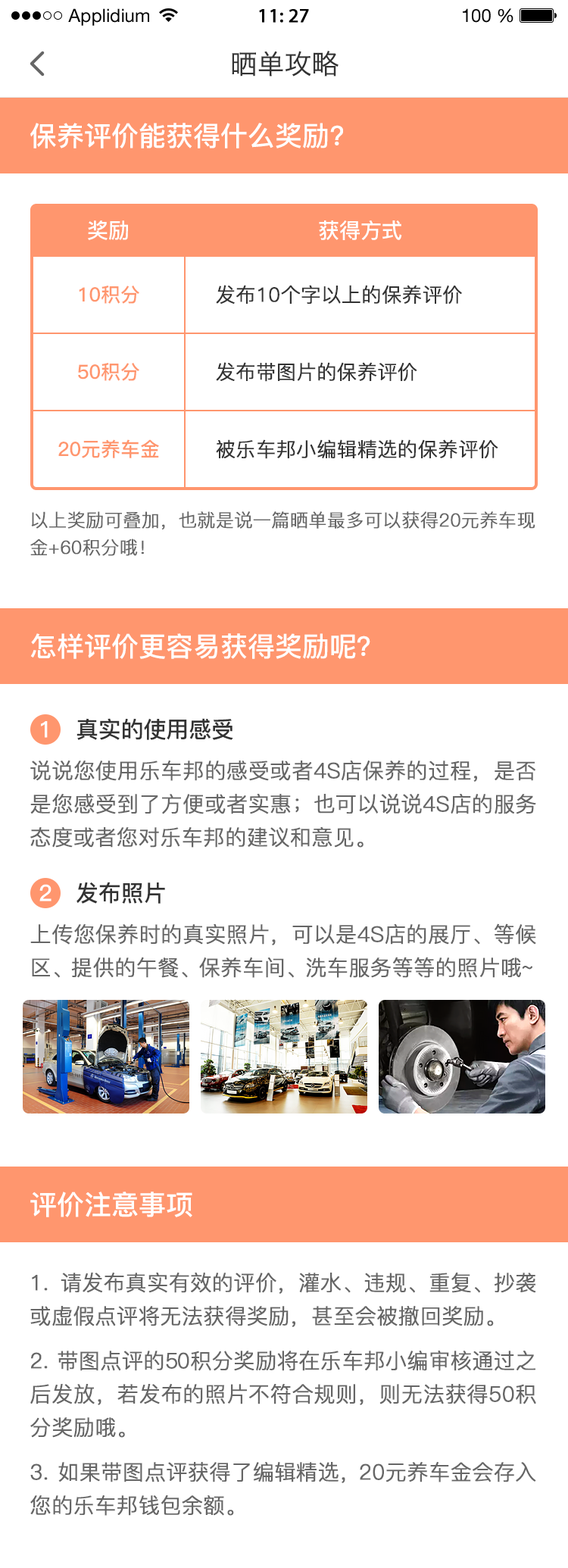
<style>
.page{position:relative;width:568px;height:1568px;background:#ffffff}
.page>*{position:absolute;margin:0}
.t1{font:27.3px "HiraginoSansGB-W3";color:#333333}
.t2{font:27.3px "PingFang-SC-Bold";color:#ffffff}
.t3{font:21.2px "PingFang-SC-Bold";letter-spacing:-0.005em;color:#ffffff}
.t4{font:19.7px "PingFang-SC-Bold";color:#ff966e}
.t5{font:19.7px "PingFang-SC-Regular";color:#333333;font-weight:bold}
.t6{font:18.2px/27.3px "PingFang-SC-Regular";letter-spacing:-0.005em;color:#666666;font-weight:bold}
.t7{font:22.7px "PingFang-SC-Bold";letter-spacing:-0.005em;color:#ffffff}
.t8{font:22.7px "PingFang-SC-Bold";letter-spacing:-0.005em;color:#333333}
.t9{font:21.2px/33.3px "PingFang-SC-Regular";letter-spacing:-0.005em;color:#666666;font-weight:bold}
</style>
<div class="page">
<p class="t1" style="left:232px;top:51px;width:107px;height:26px">晒单攻略</p>
<p class="t2" style="left:30px;top:123px;width:313px;height:25px">保养评价能获得什么奖励?</p>
<p class="t3" style="left:88px;top:220px;width:40px;height:20px">奖励</p>
<p class="t3" style="left:319px;top:220px;width:83px;height:20px">获得方式</p>
<p class="t4" style="left:79px;top:286px;width:60px;height:18px">10积分</p>
<p class="t5" style="left:216px;top:285px;width:246px;height:19px">发布10个字以上的保养评价</p>
<p class="t4" style="left:78px;top:363px;width:61px;height:18px">50积分</p>
<p class="t5" style="left:216px;top:362px;width:201px;height:20px">发布带图片的保养评价</p>
<p class="t4" style="left:58px;top:439px;width:101px;height:19px">20元养车金</p>
<p class="t5" style="left:216px;top:439px;width:282px;height:20px">被乐车邦小编辑精选的保养评价</p>
<p class="t6" style="left:30px;top:511px;width:506px;height:45px">以上奖励可叠加，也就是说一篇晒单最多可以获得20元养车现金+60积分哦！</p>
<p class="t2" style="left:30px;top:633px;width:340px;height:26px">怎样评价更容易获得奖励呢？</p>
<p class="t7" style="left:41px;top:721px;width:7px;height:17px">1</p>
<p class="t8" style="left:77px;top:718px;width:156px;height:22px">真实的使用感受</p>
<p class="t9" style="left:30px;top:761px;width:506px;height:87px;text-align:justify">说说您使用乐车邦的感受或者4S店保养的过程，是否是您感受到了方便或者实惠；也可以说说4S店的服务态度或者您对乐车邦的建议和意见。</p>
<p class="t8" style="left:77px;top:882px;width:88px;height:22px">发布照片</p>
<p class="t7" style="left:39px;top:884px;width:13px;height:17px">2</p>
<p class="t9" style="left:30px;top:923px;width:506px;height:55px;text-align:justify">上传您保养时的真实照片，可以是4S店的展厅、等候区、提供的午餐、保养车间、洗车服务等等的照片哦~</p>
<p class="t2" style="left:30px;top:1192px;width:162px;height:25px">评价注意事项</p>
<p class="t9" style="left:30px;top:1273px;width:506px;height:243px;text-align:justify">1. 请发布真实有效的评价，灌水、违规、重复、抄袭或虚假点评将无法获得奖励，甚至会被撤回奖励。<br>2. 带图点评的50积分奖励将在乐车邦小编审核通过之后发放，若发布的照片不符合规则，则无法获得50积分奖励哦。<br>3. 如果带图点评获得了编辑精选，20元养车金会存入您的乐车邦钱包余额。</p>
</div>
